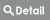
<style>
.page{position:relative;width:50px;height:20px;background:#8b8f8f}
.page>*{position:absolute;margin:0}
.t1{font:11.3px "CenturyGothic-Bold";color:#fefcfc;scale:0.93 1}
</style>
<div class="page">
<p class="t1" style="left:16px;top:6px;width:28px;height:9px">Detail</p>
</div>
